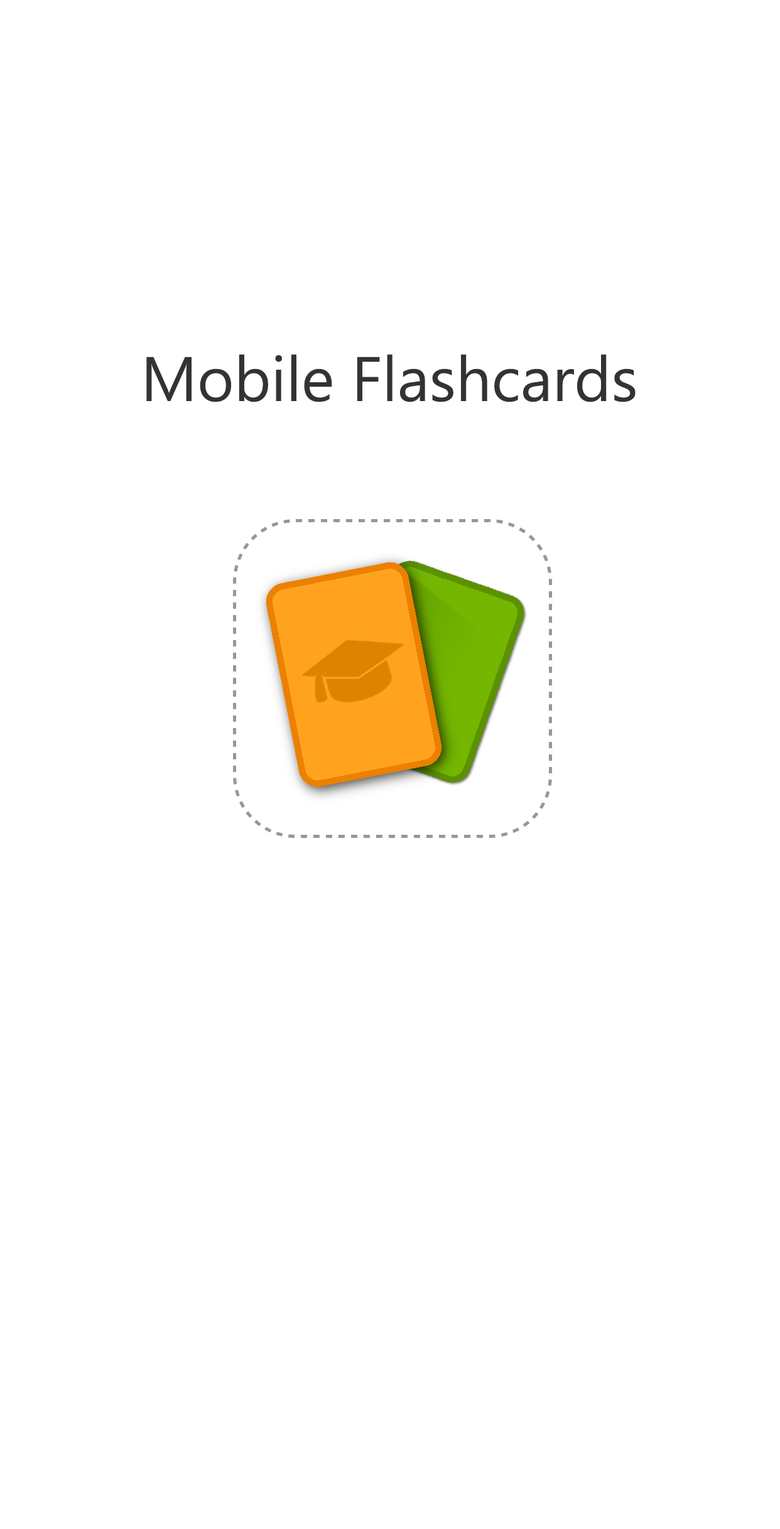
<style>
.page{position:relative;width:780px;height:1529px;background:#ffffff}
.page>*{position:absolute;margin:0}
.t1{font:62.8px "SegoeUI";color:#333333}
</style>
<div class="page">
<p class="t1" style="left:146px;top:354px;width:489px;height:48px">Mobile Flashcards</p>
</div>
